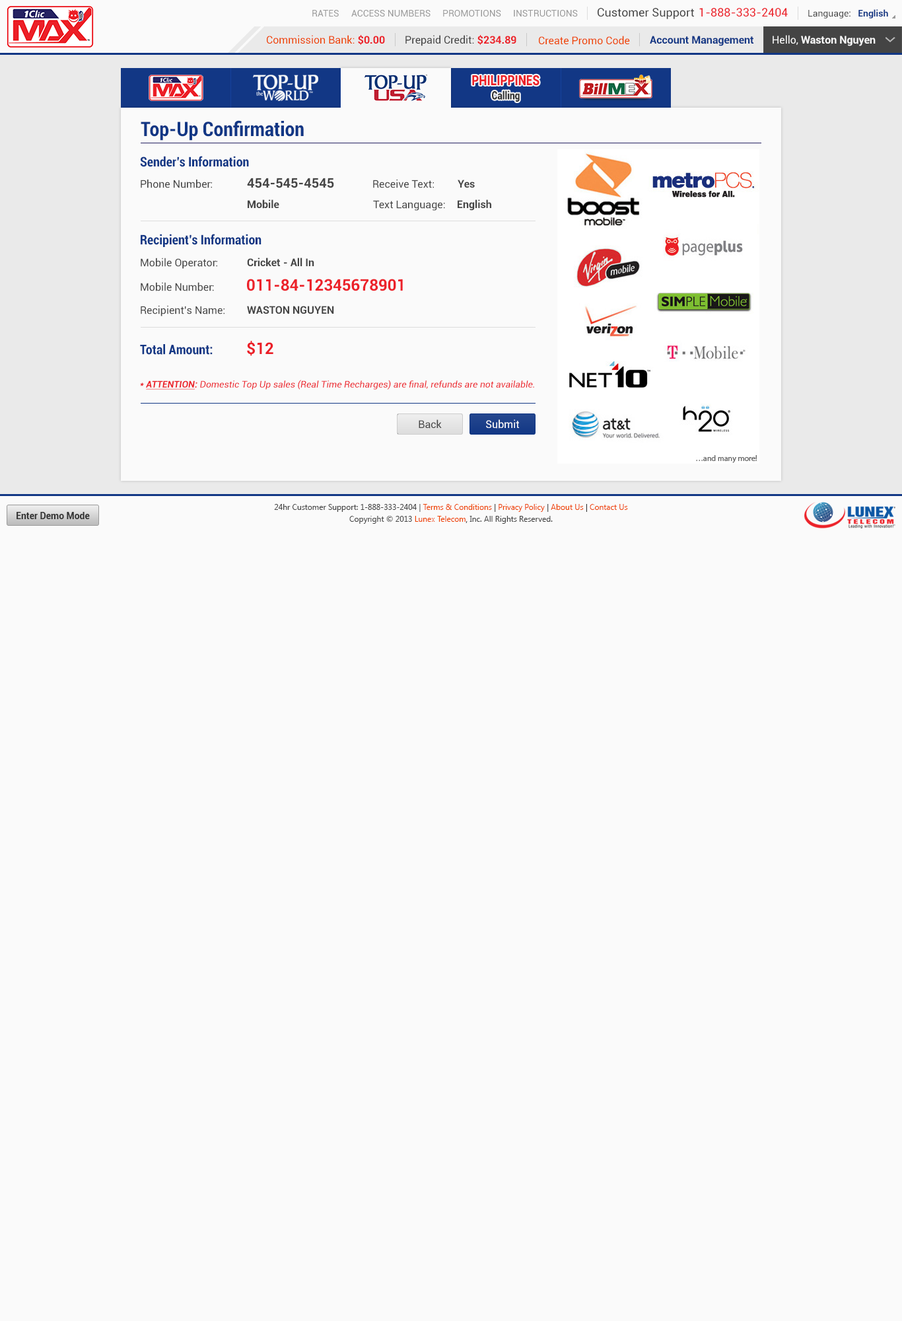
<style>
.page{position:relative;width:902px;height:1321px;background:#fafafa}
.page>*{position:absolute;margin:0}
.t1{font:9.2px "Roboto-Regular";color:#999999}
.t2{font:11.6px "Roboto-Regular";color:#444444}
.t3{font:11.6px "Roboto-Regular";color:#ec2029}
.t4{font:9.2px "Roboto-Regular";color:#444444}
.t5{font:9.2px "Roboto-Bold";color:#123785}
.t6{font:10.6px "Roboto-Regular";color:#ee4400}
.t7{font:10.6px "Roboto-Bold";color:#ec2028}
.t8{font:10.6px "Roboto-Regular";color:#444444}
.t9{font:10.6px "Roboto-Bold";color:#123785}
.t10{font:10.6px "Roboto-Bold";color:#fafafa}
.t11{font:10.6px "Roboto-Regular";color:#fafafa}
.t12{font:14.1px "Roboto-Black";color:#ec2028;scale:0.81 1}
.t13{font:11.3px "Roboto-Black";color:#333333;scale:0.81 1}
.t14{font:19.8px "Roboto-BoldCondensed";color:#123785}
.t15{font:13.2px "Roboto-BoldCondensed";color:#123785}
.t16{font:13.2px "Roboto-Bold";color:#444444}
.t17{font:10.6px "Roboto-Bold";color:#444444}
.t18{font:15.9px "Roboto-Bold";color:#ec222a}
.t19{font:15.9px "Roboto-Bold";color:#eb1e27}
.t20{font:9.2px "Roboto-Italic";color:#ec222a}
.t21{font:9.2px "Roboto-BoldItalic";color:#ec222a}
.t22{font:9.2px "Roboto-BoldItalic";color:#ec222a;text-decoration:underline}
.t23{font:10.6px "Roboto-Regular";color:#ffffff}
.t24{font:7.9px/11.9px "SegoeUI";color:#444444}
.t25{font:7.9px/11.9px "SegoeUI";color:#ee4400}
.t26{font:7.9px/11.9px "SegoeUI";color:#333333}
.t27{font:9.2px "Roboto-Bold";color:#333333}
</style>
<div class="page">
<p class="t1" style="left:312px;top:10px;width:27px;height:7px">RATES</p>
<p class="t1" style="left:351px;top:10px;width:80px;height:7px">ACCESS NUMBERS</p>
<p class="t1" style="left:443px;top:10px;width:58px;height:7px">PROMOTIONS</p>
<p class="t1" style="left:514px;top:10px;width:64px;height:7px">INSTRUCTIONS</p>
<p class="t2" style="left:598px;top:8px;width:96px;height:11px">Customer Support</p>
<p class="t3" style="left:700px;top:8px;width:88px;height:9px">1-888-333-2404</p>
<p class="t4" style="left:809px;top:9px;width:80px;height:9px">Language:   <span class="t5">English</span></p>
<p class="t6" style="left:267px;top:35px;width:118px;height:10px">Commission Bank: <span class="t7">$0.00</span></p>
<p class="t8" style="left:406px;top:35px;width:111px;height:11px">Prepaid Credit: <span class="t7">$234.89</span></p>
<p class="t6" style="left:539px;top:36px;width:91px;height:9px">Create Promo Code</p>
<p class="t9" style="left:650px;top:36px;width:104px;height:10px">Account Management</p>
<p class="t10" style="left:773px;top:35px;width:103px;height:11px"><span class="t11">Hello, </span>Waston Nguyen</p>
<p class="t12" style="left:472px;top:75px;width:68px;height:11px">PHILIPPINES</p>
<p class="t13" style="left:492px;top:91px;width:28px;height:11px">Calling</p>
<p class="t14" style="left:141px;top:120px;width:163px;height:21px">Top-Up Confirmation</p>
<p class="t15" style="left:140px;top:156px;width:109px;height:11px">Sender’s Information</p>
<p class="t8" style="left:141px;top:179px;width:71px;height:9px">Phone Number:</p>
<p class="t16" style="left:247px;top:178px;width:87px;height:10px">454-545-4545</p>
<p class="t8" style="left:373px;top:179px;width:61px;height:9px">Receive Text:</p>
<p class="t17" style="left:458px;top:180px;width:17px;height:8px">Yes</p>
<p class="t17" style="left:248px;top:200px;width:31px;height:9px">Mobile</p>
<p class="t8" style="left:373px;top:200px;width:72px;height:11px">Text Language:</p>
<p class="t17" style="left:458px;top:200px;width:34px;height:11px">English</p>
<p class="t15" style="left:141px;top:234px;width:121px;height:13px">Recipient’s Information</p>
<p class="t8" style="left:141px;top:258px;width:76px;height:11px">Mobile Operator:</p>
<p class="t17" style="left:247px;top:258px;width:67px;height:8px">Cricket - All In</p>
<p class="t18" style="left:247px;top:279px;width:156px;height:12px">011-84-12345678901</p>
<p class="t8" style="left:141px;top:282px;width:73px;height:9px">Mobile Number:</p>
<p class="t8" style="left:141px;top:305px;width:84px;height:11px">Recipient’s Name:</p>
<p class="t17" style="left:247px;top:306px;width:87px;height:8px">WASTON NGUYEN</p>
<p class="t19" style="left:247px;top:341px;width:27px;height:15px">$12</p>
<p class="t15" style="left:140px;top:344px;width:73px;height:11px">Total Amount:</p>
<p class="t20" style="left:140px;top:380px;width:394px;height:10px"><span class="t21">* </span><span class="t22">ATTENTION</span><span class="t21">: </span>Domestic Top Up sales (Real Time Recharges) are final, refunds are not available.</p>
<p class="t8" style="left:419px;top:420px;width:23px;height:9px">Back</p>
<p class="t23" style="left:486px;top:420px;width:34px;height:9px">Submit</p>
<p class="t24" style="left:274px;top:504px;width:354px;height:20px;text-align:center">24hr Customer Support: 1-888-333-2404 | <span class="t25">Terms &amp; Conditions</span><span class="t26"> | </span><span class="t25">Privacy Policy</span><span class="t26"> | </span><span class="t25">About Us</span><span class="t26"> | </span><span class="t25">Contact Us<br></span>Copyright © 2013 <span class="t25">Lunex Telecom</span><span class="t26">,</span> Inc. All Rights Reserved.</p>
<p class="t27" style="left:17px;top:512px;width:73px;height:7px">Enter Demo Mode</p>
</div>
